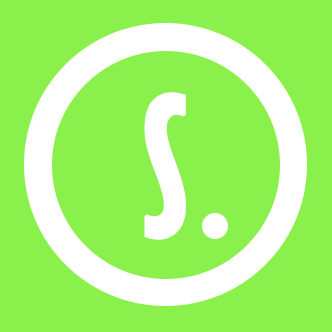
<style>
.page{position:relative;width:332px;height:332px;background:#8af14c}
.page>*{position:absolute;margin:0}
.t1{font:177.6px "GillSansMT-ExtraCondensedBold";color:#ffffff;font-weight:bold}
</style>
<div class="page">
<p class="t1" style="left:144px;top:92px;width:42px;height:148px">S</p>
</div>
